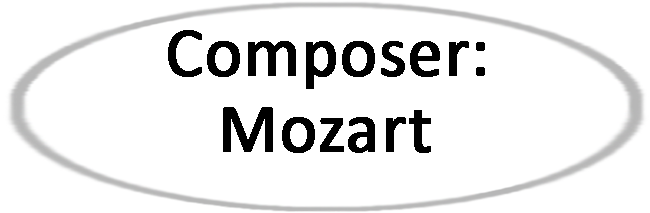
<style>
.page{position:relative;width:650px;height:213px;background:#ffffff}
.page>*{position:absolute;margin:0}
.t1{font:70px "Calibri";color:#000000;font-weight:bold}
</style>
<div class="page">
<p class="t1" style="left:168px;top:30px;width:317px;height:59px">Composer:</p>
<p class="t1" style="left:223px;top:107px;width:208px;height:46px">Mozart</p>
</div>
